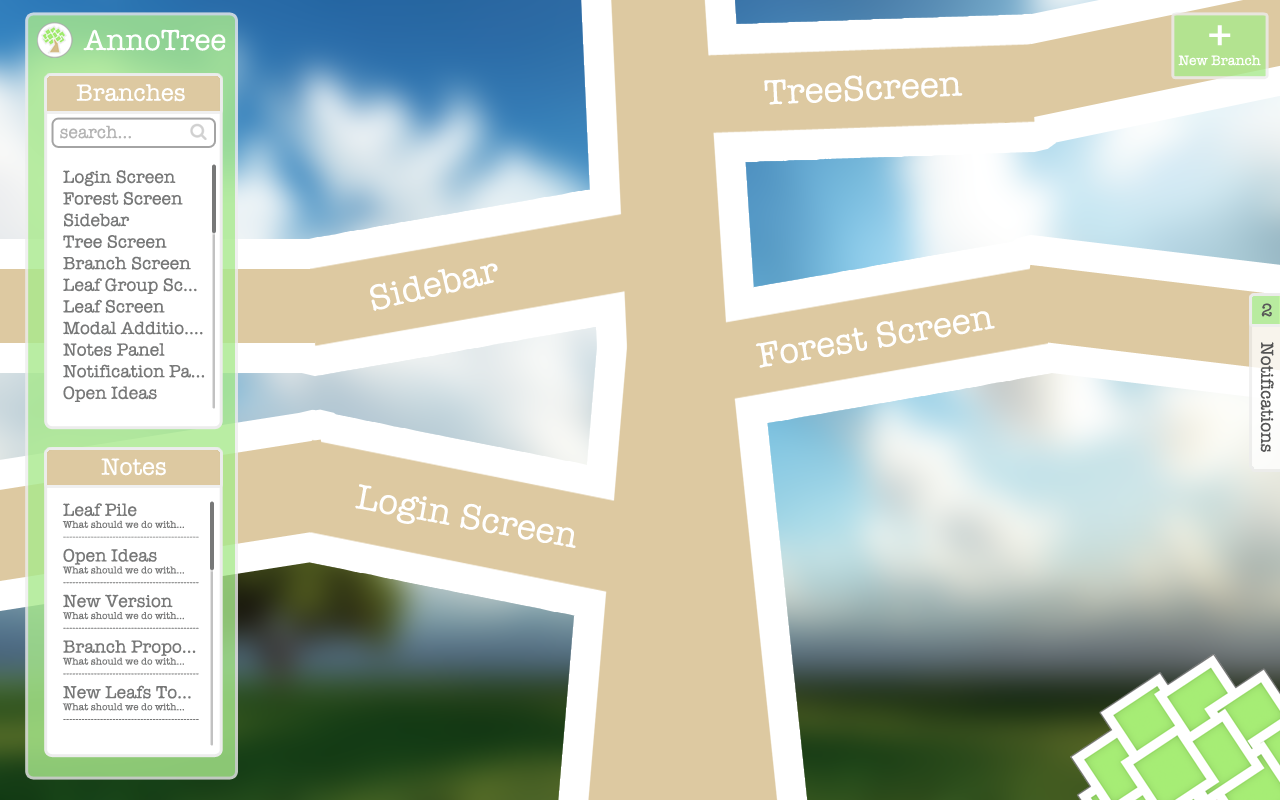
<style>
.page{position:relative;width:1280px;height:800px;background:#ddc9a1}
.page>*{position:absolute;margin:0}
.t1{font:30px "AmericanTypewriter";color:#ffffff}
.t2{font:48px "AmericanTypewriter";color:#ffffff}
.t3{font:14px "AmericanTypewriter";color:#ffffff}
.t4{font:36px "AmericanTypewriter";color:#ffffff}
.t5{font:24px "AmericanTypewriter";color:#ffffff}
.t6{font:18px "AmericanTypewriter";color:#b4b4b4}
.t7{font:18px "AmericanTypewriter";color:#777878}
.t8{font:18px "AmericanTypewriter";color:#585858}
.t9{font:18px "AmericanTypewriter";color:#555555}
.t10{font:10px "AmericanTypewriter";color:#777878}
</style>
<div class="page">
<p class="t1" style="left:83px;top:29px;width:143px;height:22px">AnnoTree</p>
<p class="t2" style="left:1209px;top:25px;width:22px;height:21px">+</p>
<p class="t3" style="left:1178px;top:55px;width:83px;height:11px">New Branch</p>
<p class="t4" style="left:764px;top:75px;width:199px;height:30px;rotate:-3deg">TreeScreen</p>
<p class="t5" style="left:76px;top:84px;width:109px;height:18px">Branches</p>
<p class="t6" style="left:60px;top:125px;width:71px;height:14px">search...</p>
<p class="t7" style="left:63px;top:170px;width:142px;height:232px">Login Screen<br>Forest Screen<br>Sidebar<br>Tree Screen<br>Branch Screen<br>Leaf Group Sc...<br>Leaf Screen<br>Modal Additio....<br>Notes Panel<br>Notification Pa...<br>Open Ideas</p>
<p class="t4" style="left:370px;top:263px;width:128px;height:48px;rotate:-13deg">Sidebar</p>
<p class="t8" style="left:1261px;top:303px;width:11px;height:14px">2</p>
<p class="t4" style="left:755px;top:311px;width:240px;height:57px;rotate:-10deg">Forest Screen</p>
<p class="t9" style="left:1260px;top:342px;width:14px;height:110px;rotate:90deg">Notifications</p>
<p class="t5" style="left:101px;top:458px;width:65px;height:18px">Notes</p>
<p class="t4" style="left:355px;top:484px;width:221px;height:64px;rotate:10deg">Login Screen</p>
<p class="t10" style="left:62px;top:503px;width:137px;height:217px"><span class="t7">Leaf Pile<br></span>What should we do with...<br>--------------------------------------------<br><span class="t7">Open Ideas<br></span>What should we do with...<br>--------------------------------------------<br><span class="t7">New Version<br></span>What should we do with...<br>--------------------------------------------<br><span class="t7">Branch Propo...<br></span>What should we do with...<br>--------------------------------------------<br><span class="t7">New Leafs To...<br></span>What should we do with...<br>--------------------------------------------</p>
</div>
